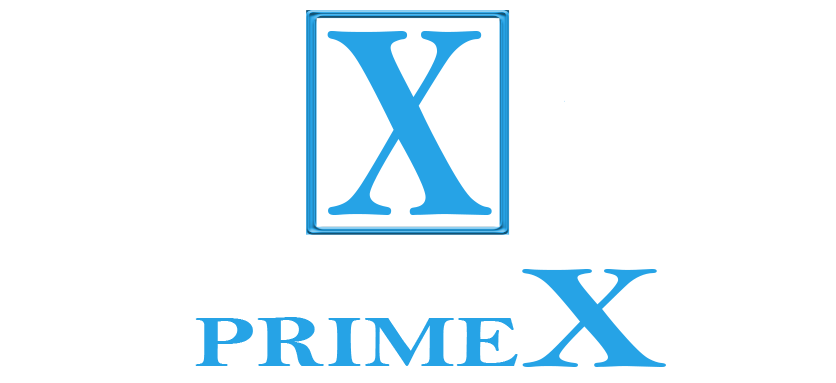
<style>
.page{position:relative;width:836px;height:383px;background:#ffffff}
.page>*{position:absolute;margin:0}
.t1{font:283.6px "BellMTBold";color:#26a3e6;scale:0.79 1}
.t2{font:75px "BellMTBold";color:#26a3e6;scale:1.31 1}
.t3{font:150px "BellMTBold";color:#26a3e6;scale:1.31 1}
</style>
<div class="page">
<p class="t1" style="left:327px;top:31px;width:165px;height:184px">X</p>
<p class="t2" style="left:195px;top:269px;width:471px;height:98px">PRIME<span class="t3">X</span></p>
</div>
